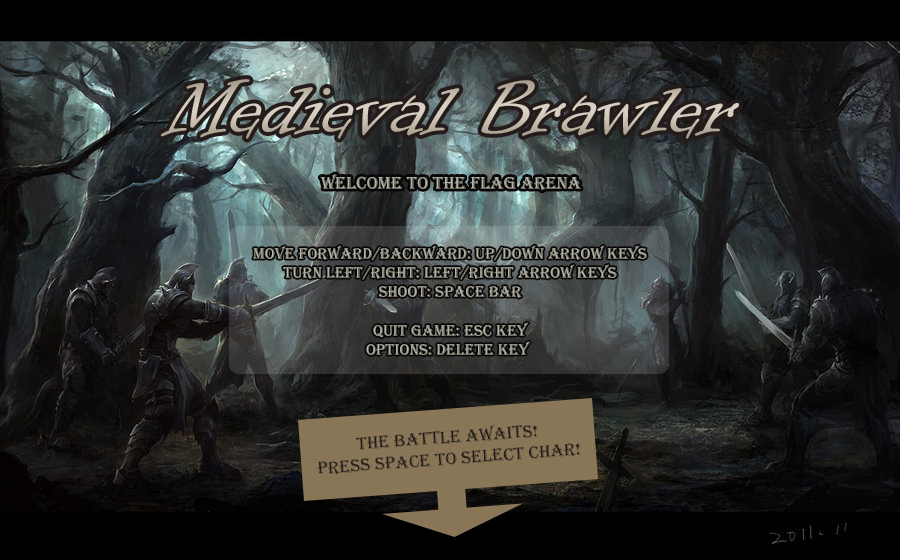
<style>
.page{position:relative;width:900px;height:560px}
.page>*{position:absolute;margin:0}
.t1{font:90px "InformalRoman-Regular";color:#cac2b3}
.t2{font:18px "Algerian";color:#b1b4a4}
.t3{font:16px "Algerian";color:#b1b4a4}
.t4{font:18px "Algerian";color:#241c1a}
</style>
<div class="page">
<p class="t1" style="left:161px;top:79px;width:578px;height:60px">Medieval Brawler</p>
<p class="t2" style="left:320px;top:174px;width:261px;height:17px">Welcome to the flag arena</p>
<p class="t3" style="left:253px;top:245px;width:394px;height:110px;text-align:center">Move Forward/Backward: Up/Down Arrow Keys<br>Turn Left/Right: Left/Right Arrow Keys<br>Shoot: Space bar<br><br>Quit game: Esc key<br>Options: Delete key</p>
<p class="t4" style="left:317px;top:424px;width:264px;height:51px;text-align:center;rotate:-4deg">The battle awaits!<br>Press Space to select char!</p>
</div>
